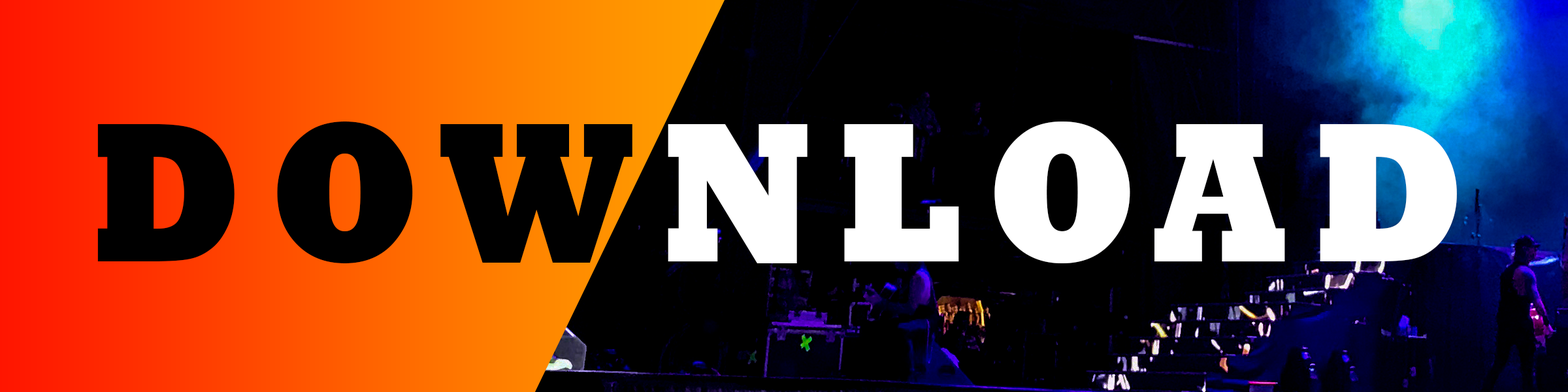
<style>
.page{position:relative;width:1568px;height:392px;background:#000000}
.page>*{position:absolute;margin:0}
.t1{font:201.9px "Rockwell-ExtraBold";letter-spacing:0.14em;color:#000000;scale:0.87 1}
.t2{font:201.9px "Rockwell-ExtraBold";letter-spacing:0.14em;color:#ffffff;scale:0.87 1}
</style>
<div class="page">
<p class="t1" style="left:97px;top:122px;width:535px;height:141px">DOW</p>
<p class="t2" style="left:668px;top:122px;width:789px;height:141px">NLOAD</p>
</div>
